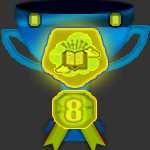
<style>
.page{position:relative;width:150px;height:150px;background:#333333}
.page>*{position:absolute;margin:0}
.t1{font:28.2px "Impact";color:#e3e718;scale:1.29 1}
</style>
<div class="page">
<p class="t1" style="left:65px;top:98px;width:18px;height:24px">8</p>
</div>
